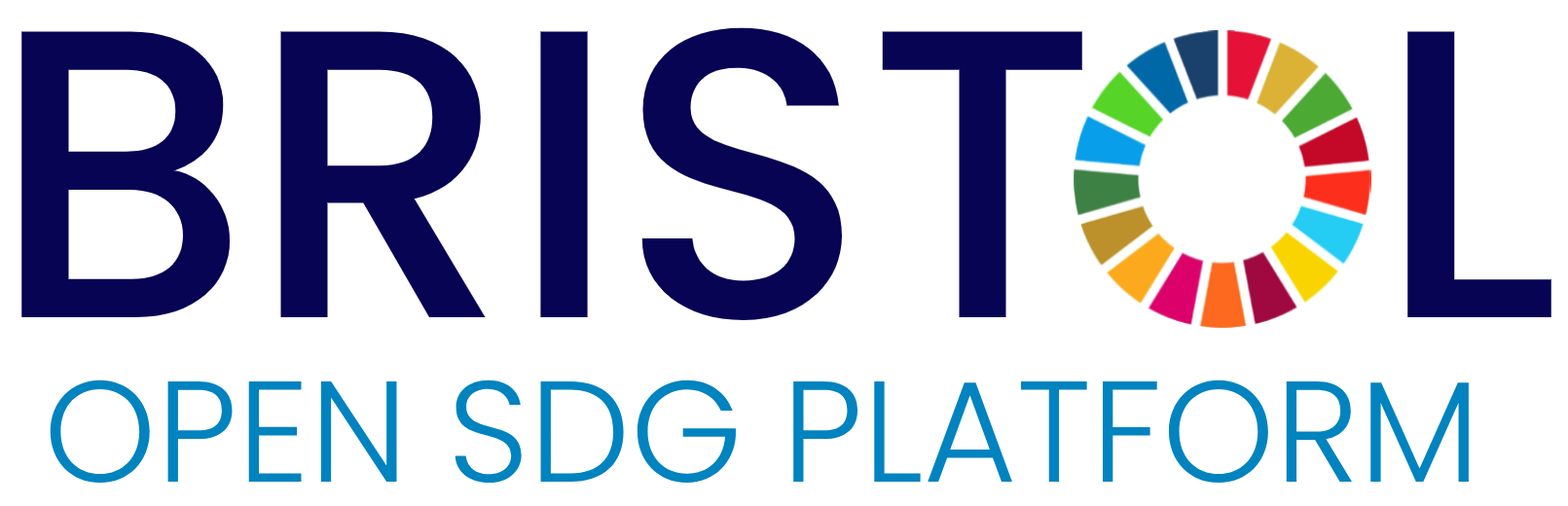
<style>
.page{position:relative;width:1568px;height:506px;background:#ffffff}
.page>*{position:absolute;margin:0}
.t1{font:411px "Poppins-Medium";color:#060453}
.t2{font:143.4px "Poppins-Light";color:#0083bf}
</style>
<div class="page">
<p class="t1" style="left:21px;top:27px;width:1061px;height:293px">BRIST</p>
<p class="t1" style="left:1407px;top:31px;width:144px;height:286px">L</p>
<p class="t2" style="left:50px;top:380px;width:1419px;height:103px">OPEN SDG PLATFORM</p>
</div>
